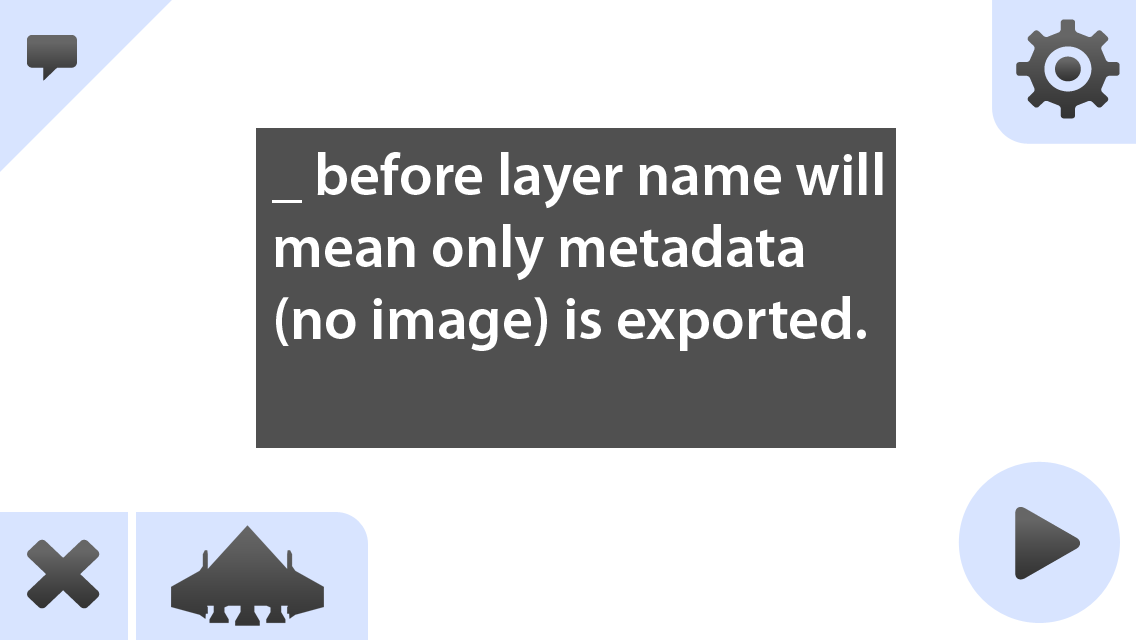
<style>
.page{position:relative;width:1136px;height:640px;background:#ffffff}
.page>*{position:absolute;margin:0}
.t1{font:60px "MyriadPro-Semibold";color:#ffffff}
</style>
<div class="page">
<p class="t1" style="left:272px;top:152px;width:611px;height:199px">_ before layer name will<br>mean only metadata <br>(no image) is exported.</p>
</div>
